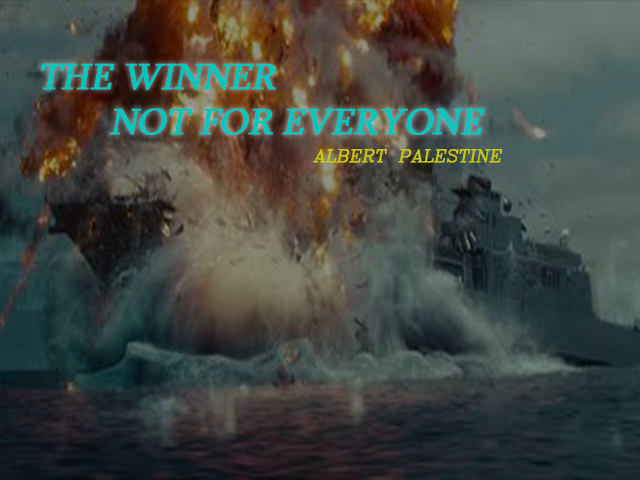
<style>
.page{position:relative;width:640px;height:480px}
.page>*{position:absolute;margin:0}
.t1{font:37.4px "Sylfaen";letter-spacing:-0.02em;color:#01c7c0;text-transform:uppercase;font-weight:bold;font-style:italic}
.t2{font:16.7px "SWRomnc";letter-spacing:-0.02em;color:#cbc90e;text-transform:uppercase;font-weight:bold;font-style:italic}
</style>
<div class="page">
<p class="t1" style="left:41px;top:63px;width:444px;height:72px">the winner<br>  not for everyone</p>
<p class="t2" style="left:313px;top:149px;width:190px;height:14px">albert palestine</p>
</div>
